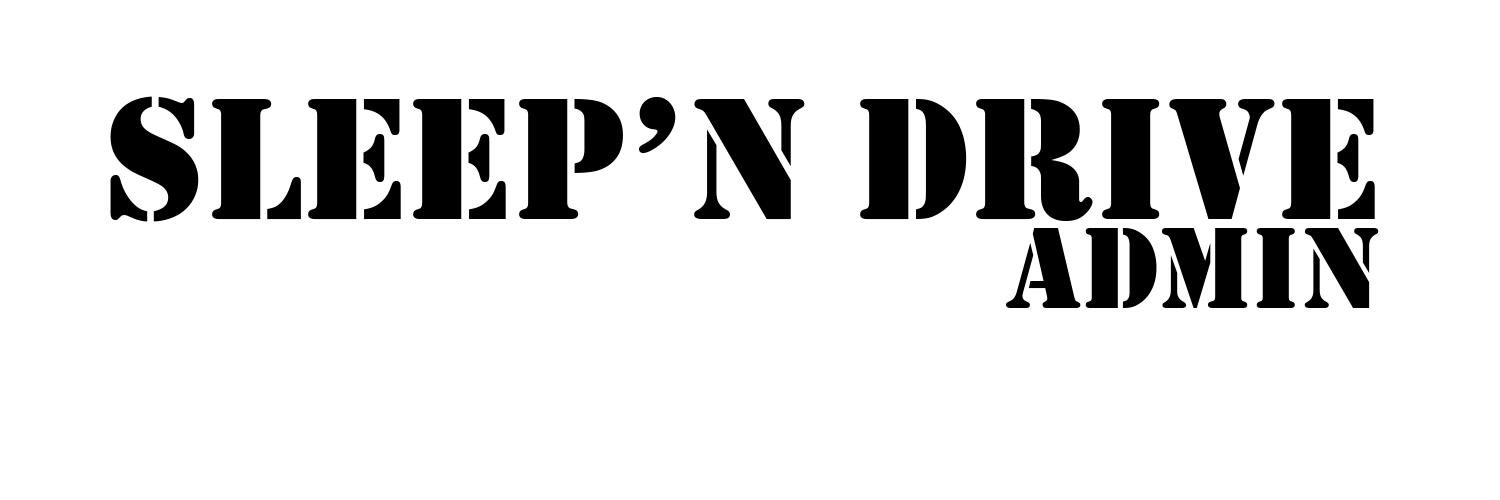
<style>
.page{position:relative;width:1500px;height:500px;background:#ffffff}
.page>*{position:absolute;margin:0}
.t1{font:180px "Stencil";color:#000001}
.t2{font:120px "Stencil";color:#000000}
</style>
<div class="page">
<p class="t1" style="left:110px;top:96px;width:1265px;height:126px">Sleep’n Drive</p>
<p class="t2" style="left:1006px;top:228px;width:373px;height:80px">admin</p>
</div>
